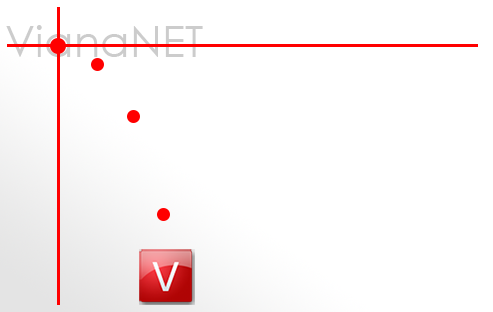
<style>
.page{position:relative;width:493px;height:312px;background:#ffffff}
.page>*{position:absolute;margin:0}
.t1{font:43.2px "CenturyGothic";color:#cccccc}
</style>
<div class="page">
<p class="t1" style="left:6px;top:25px;width:197px;height:32px">VianaNET</p>
</div>
